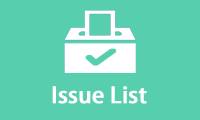
<style>
.page{position:relative;width:200px;height:120px;background:#57ceae}
.page>*{position:absolute;margin:0}
.t1{font:22px "AdobeHeitiStd-Regular";color:#ffffff;font-weight:bold}
</style>
<div class="page">
<p class="t1" style="left:52px;top:86px;width:95px;height:18px">Issue List</p>
</div>
